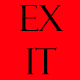
<style>
.page{position:relative;width:80px;height:80px;background:#ff000c}
.page>*{position:absolute;margin:0}
.t1{font:36px "FelixTitlingMT";color:#000000}
</style>
<div class="page">
<p class="t1" style="left:20px;top:5px;width:43px;height:70px;text-align:center">EX<br>IT</p>
</div>
